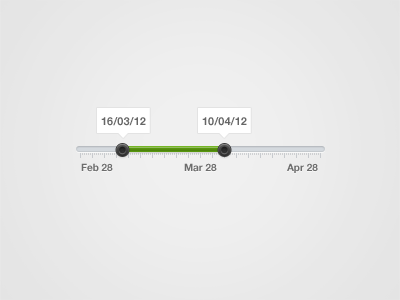
<style>
.page{position:relative;width:400px;height:300px}
.page>*{position:absolute;margin:0}
.t1{font:11px "HelveticaNeue-Bold";color:#666666}
.t2{font:10px "HelveticaNeue-Bold";color:#6d6d6d}
</style>
<div class="page">
<p class="t1" style="left:101px;top:117px;width:45px;height:9px">16/03/12</p>
<p class="t1" style="left:202px;top:117px;width:45px;height:9px">10/04/12</p>
<p class="t2" style="left:81px;top:163px;width:32px;height:9px">Feb 28</p>
<p class="t2" style="left:184px;top:163px;width:33px;height:9px">Mar 28</p>
<p class="t2" style="left:287px;top:163px;width:31px;height:10px">Apr 28</p>
</div>
